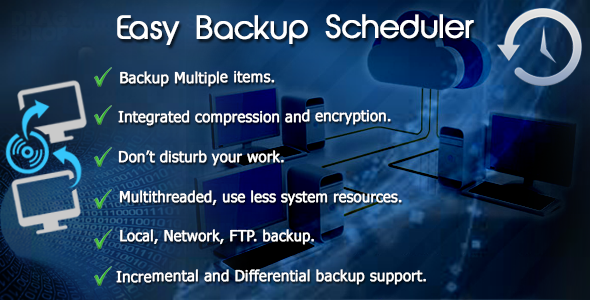
<style>
.page{position:relative;width:590px;height:300px}
.page>*{position:absolute;margin:0}
.t1{font:30px "AbeatbyKai";color:#ffffff;font-weight:bold}
.t2{font:15px "Tahoma";color:#ffffff;font-weight:bold}
.t3{font:15px "Tahoma";color:#ffffff;font-weight:bold;scale:0.97 1}
</style>
<div class="page">
<p class="t1" style="left:117px;top:14px;width:357px;height:31px">Easy Backup Scheduler</p>
<p class="t2" style="left:120px;top:70px;width:155px;height:17px">Backup Multiple items.</p>
<p class="t2" style="left:118px;top:109px;width:273px;height:17px">Integrated compression and encryption.</p>
<p class="t2" style="left:118px;top:150px;width:166px;height:16px">Don’t disturb your work.</p>
<p class="t3" style="left:119px;top:190px;width:283px;height:16px">Multithreaded, use less system resources.</p>
<p class="t3" style="left:120px;top:229px;width:194px;height:16px">Local, Network, FTP. backup.</p>
<p class="t2" style="left:116px;top:269px;width:310px;height:16px">Incremental and Differential backup support.</p>
</div>
